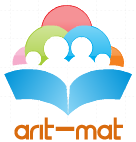
<style>
.page{position:relative;width:136px;height:142px;background:#ffffff}
.page>*{position:absolute;margin:0}
.t1{font:36px "BDP-Birgula";color:#d96b0e;font-variant:small-caps}
</style>
<div class="page">
<p class="t1" style="left:14px;top:117px;width:109px;height:23px">arit-mat</p>
</div>
